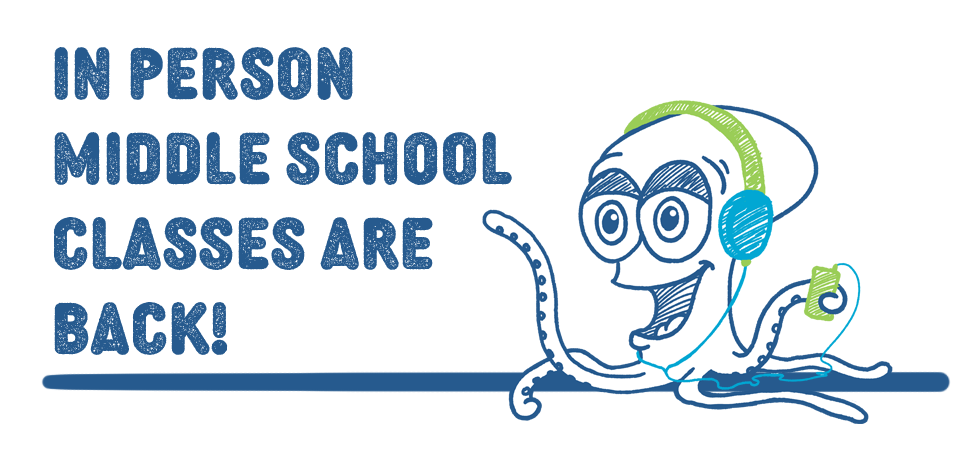
<style>
.page{position:relative;width:960px;height:450px;background:#ffffff}
.page>*{position:absolute;margin:0}
.t1{font:70.8px "DiazoMVBRough2Cond-Black";color:#265a8e}
</style>
<div class="page">
<p class="t1" style="left:53px;top:47px;width:459px;height:308px">In person middle school classes are back!</p>
</div>
